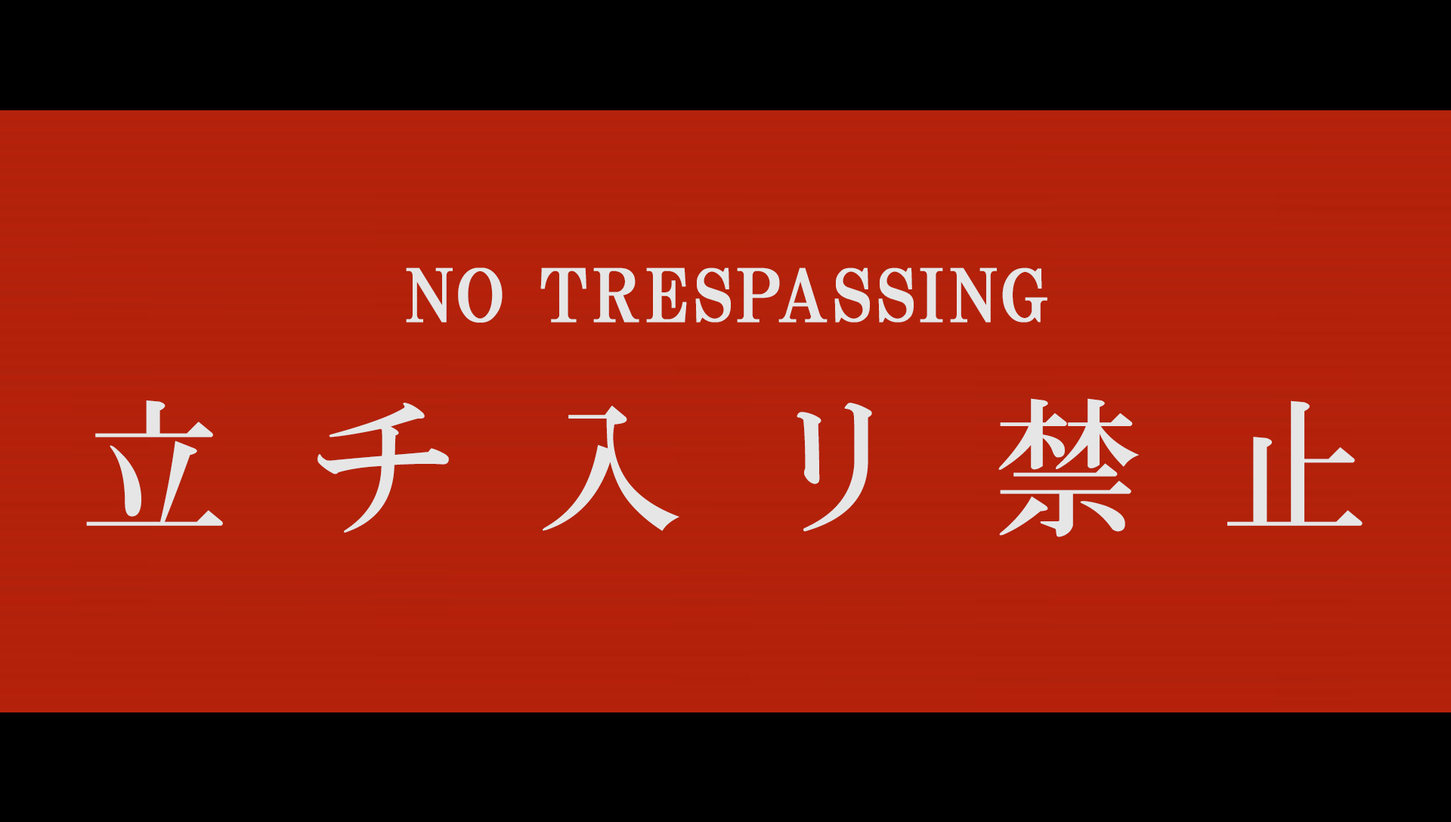
<style>
.page{position:relative;width:1451px;height:822px;background:#000000}
.page>*{position:absolute;margin:0}
.t1{font:72.5px "HGPMinchoB";letter-spacing:0.05em;color:#e6e6e6;text-transform:uppercase;font-weight:bold}
.t2{font:148.1px "HGMinchoB";letter-spacing:0.54em;color:#e6e6e6}
</style>
<div class="page">
<p class="t1" style="left:406px;top:267px;width:641px;height:56px">No Trespassing</p>
<p class="t2" style="left:86px;top:398px;width:1276px;height:139px">立チ入リ禁止</p>
</div>
